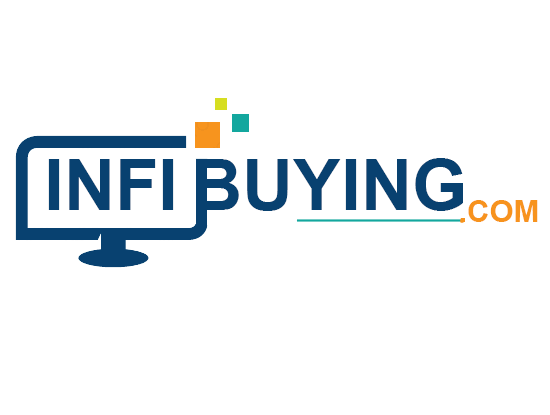
<style>
.page{position:relative;width:550px;height:415px;background:#ffffff}
.page>*{position:absolute;margin:0}
.t1{font:71px "Arial-BoldMT";color:#084170}
.t2{font:31px "Arial-BoldMT";color:#f7931e}
</style>
<div class="page">
<p class="t1" style="left:48px;top:159px;width:126px;height:51px">INFI</p>
<p class="t1" style="left:196px;top:158px;width:267px;height:53px">BUYING</p>
<p class="t2" style="left:460px;top:200px;width:78px;height:22px">.COM</p>
</div>
